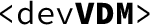
<style>
.page{position:relative;width:150px;height:26px;background:#ffffff}
.page>*{position:absolute;margin:0}
.t1{font:32.4px "SourceCodePro-Regular";letter-spacing:0.01em;color:#000000}
.t2{font:32.4px "SourceCodePro-Black";letter-spacing:0.01em;color:#000000}
</style>
<div class="page">
<p class="t1" style="left:0px;top:0px;width:150px;height:25px">&lt;dev<span class="t2">VDM</span>&gt;</p>
</div>
